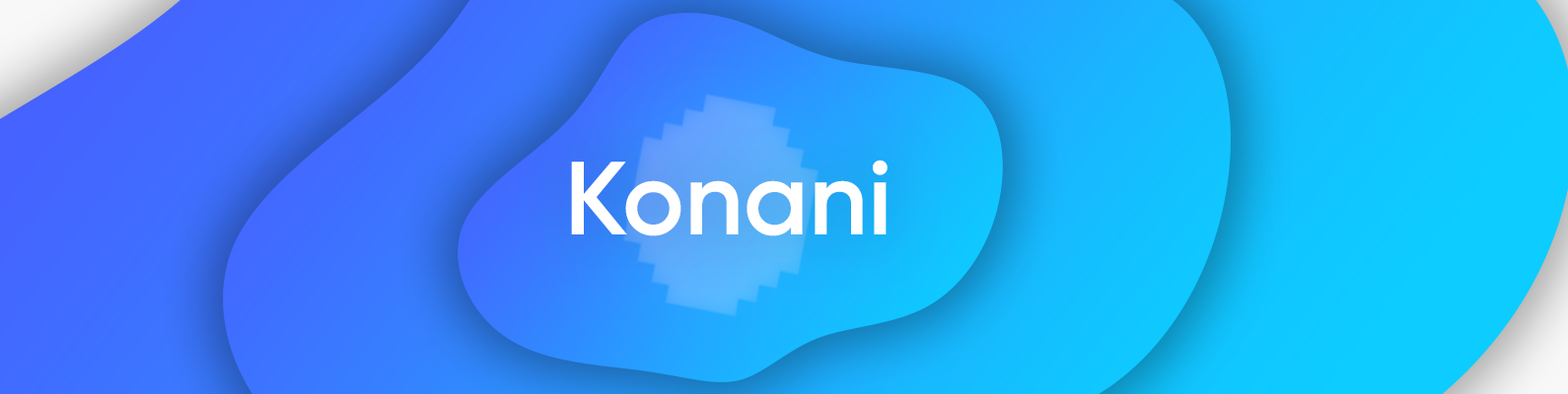
<style>
.page{position:relative;width:1568px;height:394px}
.page>*{position:absolute;margin:0}
.t1{font:103.6px "Gilroy-SemiBold";color:#ffffff}
</style>
<div class="page">
<p class="t1" style="left:571px;top:160px;width:317px;height:77px">Konani</p>
</div>
